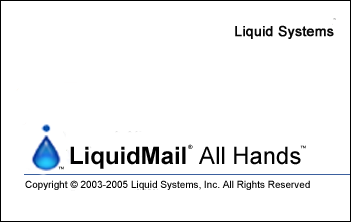
<style>
.page{position:relative;width:351px;height:222px;background:#ffffff}
.page>*{position:absolute;margin:0}
.t1{font:13.9px "ArialMT";color:#060606;font-weight:bold}
.t2{font:23.9px "Arial-BoldMT";color:#010101}
.t3{font:6px "ArialMT"}
.t4{font:23.9px "ArialMT";color:#010101}
.t5{font:10px "ArialMT";color:#010101}
</style>
<div class="page">
<p class="t1" style="left:235px;top:25px;width:99px;height:14px">Liquid Systems</p>
<p class="t2" style="left:70px;top:146px;width:116px;height:23px">LiquidMail</p>
<p class="t3" style="left:188px;top:144px;width:5px;height:5px">®</p>
<p class="t4" style="left:199px;top:146px;width:102px;height:19px">All Hands</p>
<p class="t3" style="left:300px;top:145px;width:6px;height:4px">™</p>
<p class="t3" style="left:58px;top:166px;width:6px;height:4px">™</p>
<p class="t5" style="left:25px;top:180px;width:285px;height:10px">Copyright © 2003-2005 Liquid Systems, Inc. All Rights Reserved</p>
</div>
